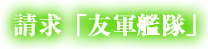
<style>
.page{position:relative;width:208px;height:49px}
.page>*{position:absolute;margin:0}
.t1{font:24px "RyuminPr6N-ExBold";color:#ffffff;font-weight:bold}
</style>
<div class="page">
<p class="t1" style="left:13px;top:13px;width:183px;height:24px">請求「友軍艦隊」</p>
</div>
